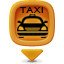
<style>
.page{position:relative;width:64px;height:64px;background:#ffffff}
.page>*{position:absolute;margin:0}
.t1{font:8px "ArialMT";letter-spacing:0.05em;color:#000000;scale:1.25 1}
</style>
<div class="page">
<p class="t1" style="left:20px;top:7px;width:23px;height:6px">TAXI</p>
</div>
